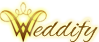
<style>
.page{position:relative;width:99px;height:42px;background:#ffffff}
.page>*{position:absolute;margin:0}
.t1{font:30.5px "AlexBrush-Regular";color:#744a08}
</style>
<div class="page">
<p class="t1" style="left:33px;top:19px;width:65px;height:24px">eddify</p>
</div>
